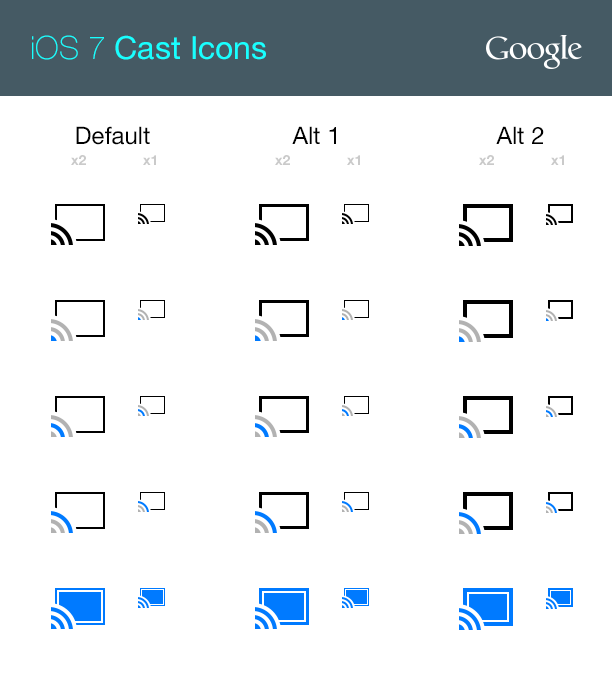
<style>
.page{position:relative;width:612px;height:685px;background:#ffffff}
.page>*{position:absolute;margin:0}
.t1{font:32px "HelveticaNeue";color:#18ffff}
.t2{font:32px "HelveticaNeue-Thin";color:#18ffff}
.t3{font:24px "HelveticaNeue";color:#000000}
.t4{font:14px "HelveticaNeue-Bold";color:#cacaca}
</style>
<div class="page">
<p class="t1" style="left:32px;top:35px;width:234px;height:25px"><span class="t2">iOS 7 </span>Cast Icons</p>
<p class="t3" style="left:76px;top:126px;width:74px;height:19px">Default</p>
<p class="t3" style="left:292px;top:126px;width:44px;height:18px">Alt 1</p>
<p class="t3" style="left:496px;top:126px;width:48px;height:18px">Alt 2</p>
<p class="t4" style="left:71px;top:155px;width:15px;height:10px">x2</p>
<p class="t4" style="left:143px;top:155px;width:13px;height:10px">x1</p>
<p class="t4" style="left:275px;top:155px;width:15px;height:10px">x2</p>
<p class="t4" style="left:347px;top:155px;width:13px;height:10px">x1</p>
<p class="t4" style="left:479px;top:155px;width:15px;height:10px">x2</p>
<p class="t4" style="left:551px;top:155px;width:13px;height:10px">x1</p>
</div>
